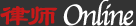
<style>
.page{position:relative;width:136px;height:26px;background:#333333}
.page>*{position:absolute;margin:0}
.t1{font:30px "Apple-Chancery";letter-spacing:-0.1em;color:#ffffff;font-weight:bold}
.t2{font:30px "STBaoli-SC-Regular";letter-spacing:-0.1em;color:#c61919;font-weight:bold}
</style>
<div class="page">
<p class="t1" style="left:0px;top:0px;width:134px;height:26px"><span class="t2">律师 </span>Online</p>
</div>
